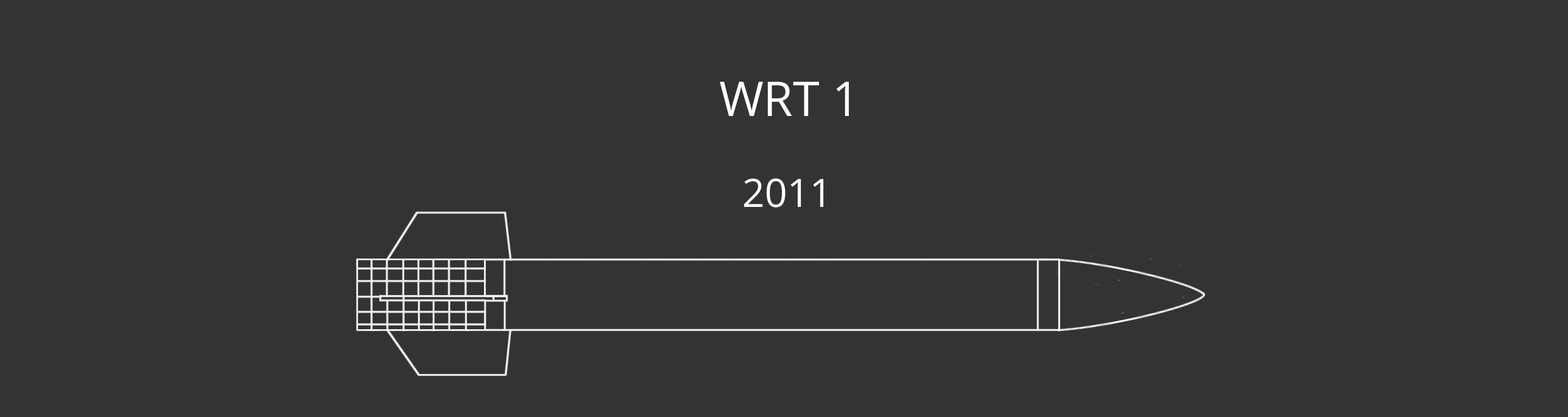
<style>
.page{position:relative;width:1568px;height:417px;background:#333333}
.page>*{position:absolute;margin:0}
.t1{font:47.9px "OpenSans";color:#ffffff}
.t2{font:39.2px "OpenSans";color:#ffffff}
</style>
<div class="page">
<p class="t1" style="left:720px;top:82px;width:129px;height:34px">WRT 1</p>
<p class="t2" style="left:744px;top:178px;width:80px;height:29px">2011</p>
</div>
